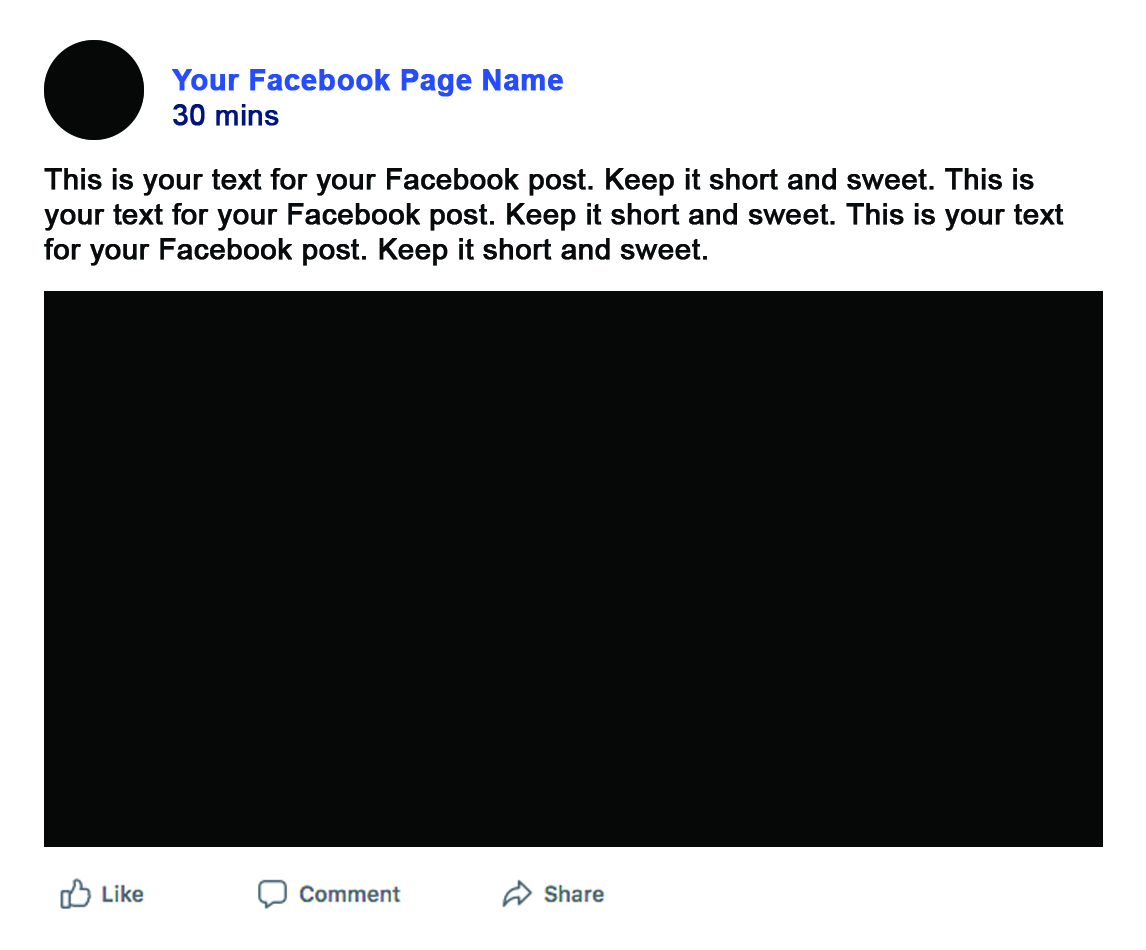
<style>
.page{position:relative;width:1146px;height:950px;background:#060808}
.page>*{position:absolute;margin:0}
.t1{font:29.2px "Arial-BoldMT";color:#254cfe;font-weight:bold}
.t2{font:29.2px "ArialMT";color:#00147f;font-weight:bold}
.t3{font:29.2px "ArialMT";color:#070a0a;font-weight:bold}
</style>
<div class="page">
<p class="t1" style="left:172px;top:69px;width:391px;height:57px">Your Facebook Page Name<br><span class="t2">30 mins</span></p>
<p class="t3" style="left:44px;top:168px;width:1020px;height:98px">This is your text for your Facebook post. Keep it short and sweet. This is your text for your Facebook post. Keep it short and sweet. This is your text for your Facebook post. Keep it short and sweet.</p>
</div>
